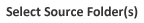
<style>
.page{position:relative;width:144px;height:23px;background:#ffffff}
.page>*{position:absolute;margin:0}
.t1{font:14px "Calibri-Bold";color:#363535}
</style>
<div class="page">
<p class="t1" style="left:6px;top:6px;width:132px;height:13px">Select Source Folder(s)</p>
</div>
